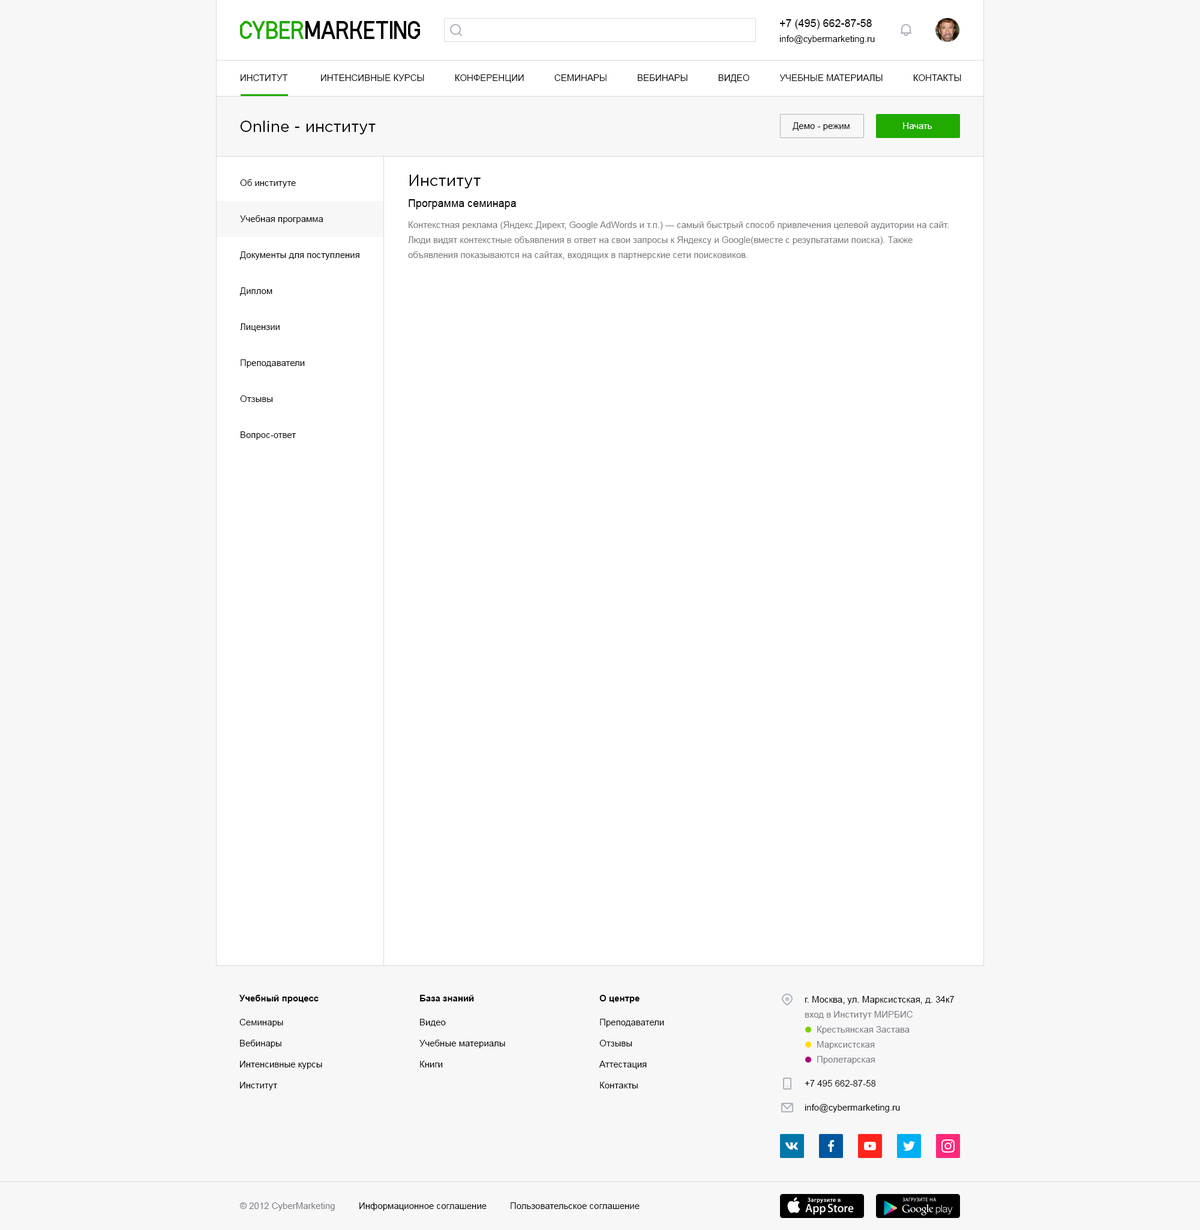
<style>
.page{position:relative;width:1200px;height:1230px;background:#f7f7f8}
.page>*{position:absolute;margin:0}
.t1{font:10.8px "ArialMT";color:#000000}
.t2{font:9px "ArialMT";color:#000000}
.t3{font:9px "ArialMT";color:#000000;text-transform:uppercase}
.t4{font:15.6px "GothamPro";color:#000000}
.t5{font:9px "ArialMT";color:#ffffff}
.t6{font:9px/36px "ArialMT";color:#000000}
.t7{font:9px/15px "ArialMT";color:#787a80}
.t8{font:9px "Arial-BoldMT";color:#000000}
.t9{font:9px/15px "ArialMT";color:#000000}
.t10{font:9px/15px "ArialMT";color:#787b81}
.t11{font:9px/21px "ArialMT";color:#000000}
.t12{font:9px "ArialMT";color:#787b81}
.t13{font:9px/24px "ArialMT";color:#000000}
</style>
<div class="page">
<p class="t1" style="left:779px;top:19px;width:93px;height:10px">+7 (495) 662-87-58</p>
<p class="t2" style="left:779px;top:35px;width:96px;height:9px">info@cybermarketing.ru</p>
<p class="t3" style="left:241px;top:74px;width:720px;height:9px">Институт             Интенсивные курсы            конференции            Семинары            вебинары            Видео            Учебные материалы            Контакты</p>
<p class="t4" style="left:240px;top:121px;width:136px;height:13px">Online - институт</p>
<p class="t2" style="left:793px;top:122px;width:57px;height:9px">Демо - режим</p>
<p class="t5" style="left:903px;top:122px;width:29px;height:7px">Начать</p>
<p class="t6" style="left:239px;top:179px;width:120px;height:261px">Об институте<br>Учебная программа<br>Документы для поступления<br>Диплом<br>Лицензии<br>Преподаватели<br>Отзывы<br>Вопрос-ответ</p>
<p class="t4" style="left:409px;top:175px;width:72px;height:13px">Институт</p>
<p class="t1" style="left:409px;top:199px;width:107px;height:10px">Программа семинара</p>
<p class="t7" style="left:408px;top:221px;width:541px;height:39px">Контекстная реклама (Яндекс.Директ, Google AdWords и т.п.) — самый быстрый способ привлечения целевой аудитории на сайт. <br>Люди видят контекстные объявления в ответ на свои запросы к Яндексу и Google(вместе с результатами поиска). Также <br>объявления показываются на сайтах, входящих в партнерские сети поисковиков.</p>
<p class="t8" style="left:239px;top:995px;width:80px;height:8px">Учебный процесс</p>
<p class="t8" style="left:420px;top:995px;width:54px;height:6px">База знаний</p>
<p class="t8" style="left:599px;top:995px;width:41px;height:8px">О центре</p>
<p class="t9" style="left:805px;top:996px;width:150px;height:23px">г. Москва, ул. Марксистская, д. 34к7<br><span class="t10">вход в Институт МИРБИС</span></p>
<p class="t11" style="left:239px;top:1019px;width:83px;height:71px">Семинары<br>Вебинары<br>Интенсивные курсы<br>Институт</p>
<p class="t11" style="left:419px;top:1019px;width:86px;height:48px">Видео<br>Учебные материалы<br>Книги</p>
<p class="t11" style="left:599px;top:1019px;width:65px;height:69px">Преподаватели<br>Отзывы<br>Аттестация<br>Контакты</p>
<p class="t12" style="left:817px;top:1026px;width:93px;height:8px">Крестьянская Застава</p>
<p class="t12" style="left:817px;top:1041px;width:58px;height:8px">Марксистская</p>
<p class="t12" style="left:817px;top:1056px;width:58px;height:8px">Пролетарская</p>
<p class="t13" style="left:805px;top:1080px;width:95px;height:32px">+7 495 662-87-58<br>info@cybermarketing.ru</p>
<p class="t12" style="left:239px;top:1202px;width:96px;height:9px">© 2012 CyberMarketing</p>
<p class="t2" style="left:359px;top:1202px;width:128px;height:9px">Информационное соглашение</p>
<p class="t2" style="left:511px;top:1202px;width:129px;height:7px">Пользовательское соглашение</p>
</div>
